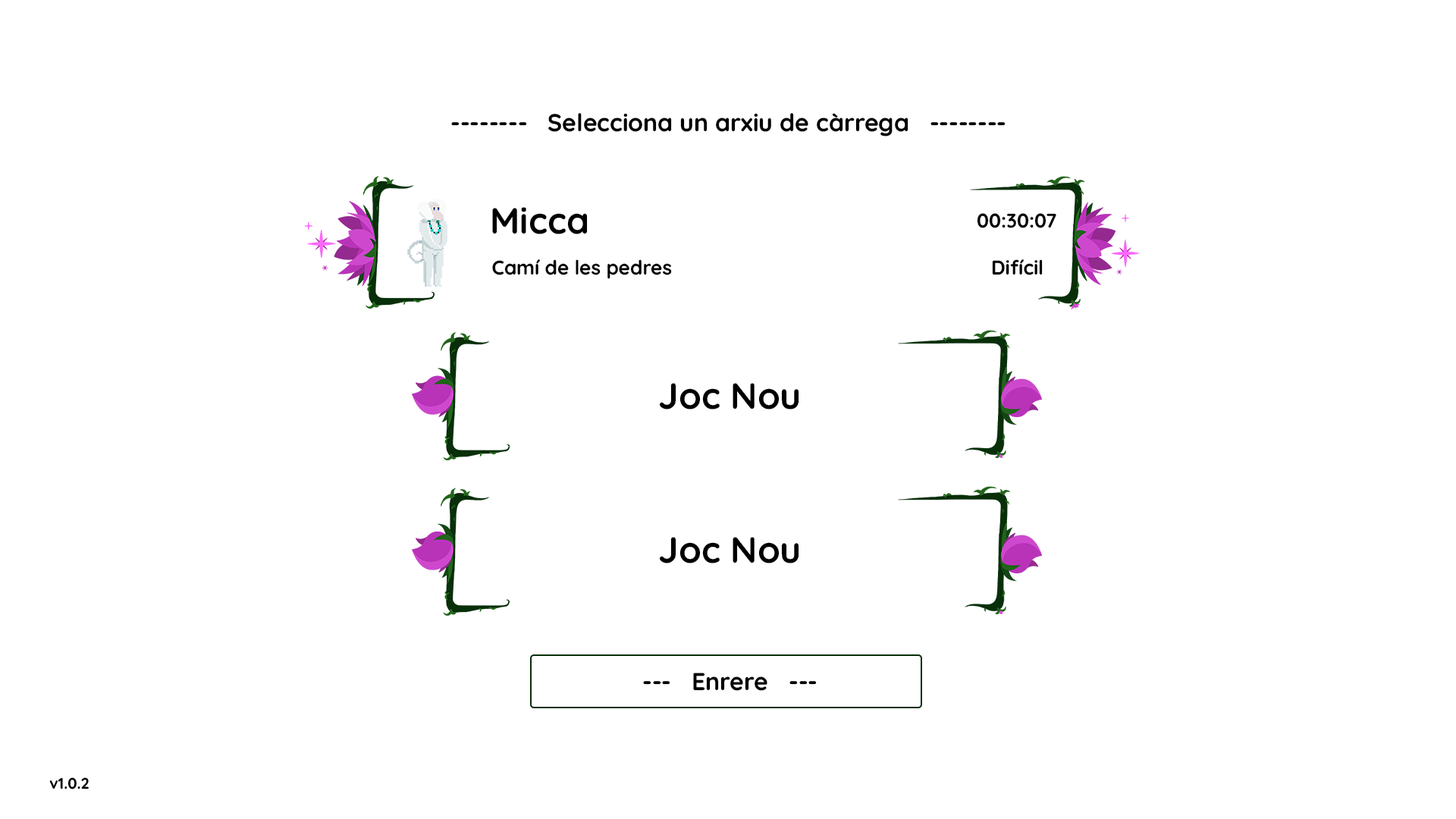
<style>
.page{position:relative;width:1456px;height:819px;background:#ffffff}
.page>*{position:absolute;margin:0}
.t1{font:24.3px "Quicksand-Bold";color:#000000}
.t2{font:36.4px "Quicksand-Bold";color:#000000}
.t3{font:19.7px "Quicksand-Bold";color:#000000}
.t4{font:15.2px "Quicksand-Bold";color:#000000}
</style>
<div class="page">
<p class="t1" style="left:451px;top:113px;width:555px;height:23px">--------   Selecciona un arxiu de càrrega   --------</p>
<p class="t2" style="left:492px;top:207px;width:96px;height:27px">Micca</p>
<p class="t3" style="left:977px;top:213px;width:79px;height:15px">00:30:07</p>
<p class="t3" style="left:492px;top:259px;width:180px;height:20px">Camí de les pedres</p>
<p class="t3" style="left:992px;top:259px;width:51px;height:16px">Difícil</p>
<p class="t2" style="left:659px;top:383px;width:140px;height:26px">Joc Nou</p>
<p class="t2" style="left:659px;top:537px;width:140px;height:26px">Joc Nou</p>
<p class="t1" style="left:643px;top:673px;width:174px;height:18px">---   Enrere   ---</p>
<p class="t4" style="left:49px;top:777px;width:40px;height:12px">v1.0.2</p>
</div>
